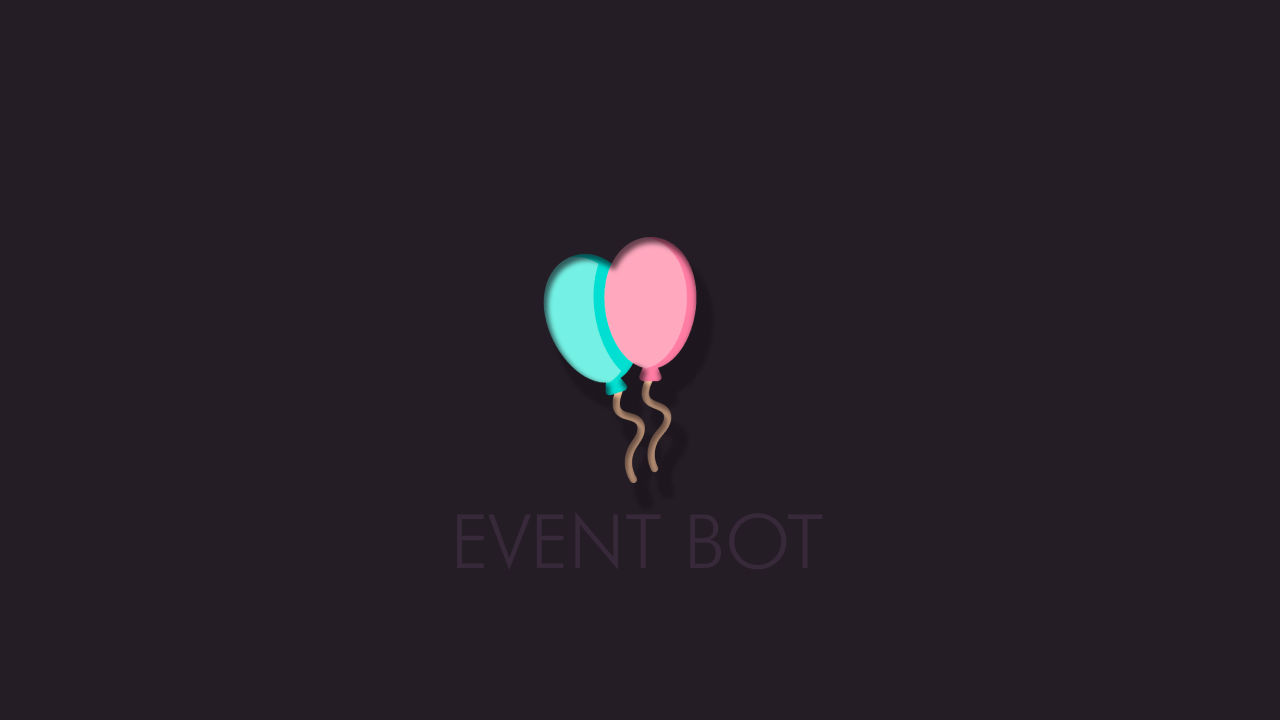
<style>
.page{position:relative;width:1280px;height:720px;background:#251d26}
.page>*{position:absolute;margin:0}
.t1{font:75px "FuturaBT-Light";color:#372939}
</style>
<div class="page">
<p class="t1" style="left:457px;top:512px;width:366px;height:58px">EVENT BOT</p>
</div>
